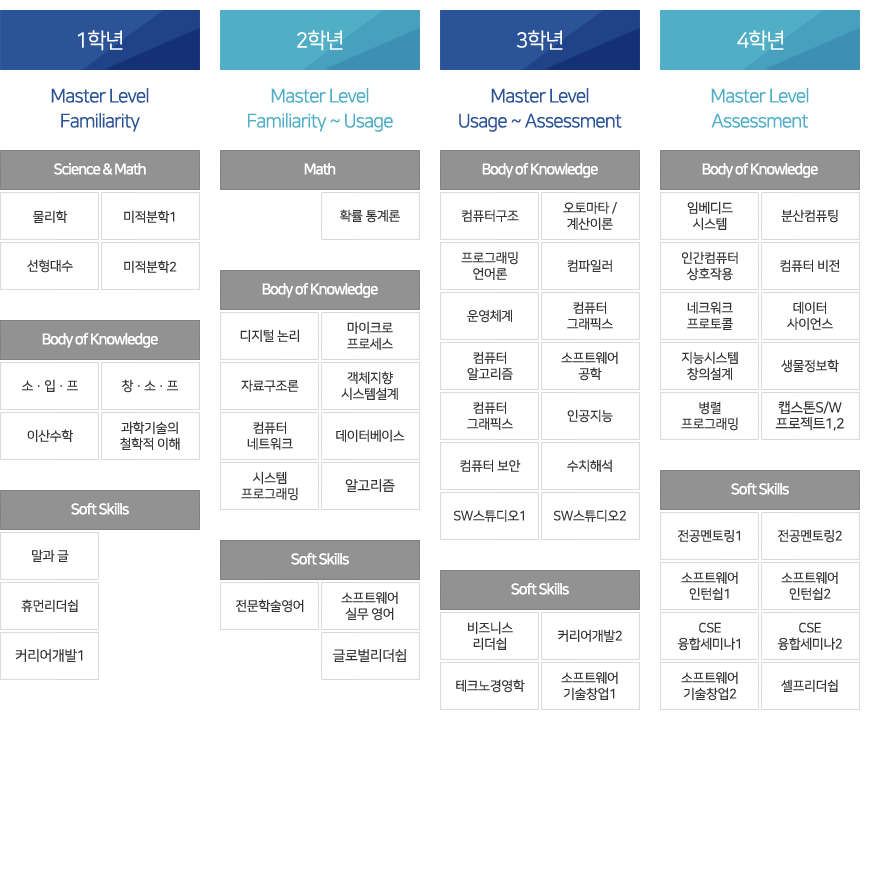
<style>
.page{position:relative;width:870px;height:870px;background:#ffffff}
.page>*{position:absolute;margin:0}
.t1{font:21px "NanumSquareR";letter-spacing:-0.05em;color:#ffffff}
.t2{font:19px/25px "NanumSquareR";letter-spacing:-0.05em;color:#2b5398}
.t3{font:19px/25px "NanumSquareR";letter-spacing:-0.05em;color:#50afc6}
.t4{font:15px "NanumSquareB";letter-spacing:-0.075em;color:#ffffff}
.t5{font:13px "NanumSquareR";letter-spacing:-0.025em;color:#333333}
.t6{font:13px/16px "NanumSquareR";letter-spacing:-0.025em;color:#333333}
.t7{font:14px/16px "NanumSquareR";letter-spacing:-0.025em;color:#333333}
.t8{font:14px "NanumSquareR";letter-spacing:-0.025em;color:#333333}
</style>
<div class="page">
<p class="t1" style="left:77px;top:30px;width:46px;height:21px">1학년</p>
<p class="t1" style="left:297px;top:30px;width:46px;height:21px">2학년</p>
<p class="t1" style="left:516px;top:30px;width:47px;height:21px">3학년</p>
<p class="t1" style="left:737px;top:30px;width:47px;height:21px">4학년</p>
<p class="t2" style="left:51px;top:88px;width:98px;height:44px;text-align:center">Master Level<br>Familiarity</p>
<p class="t3" style="left:248px;top:88px;width:145px;height:44px;text-align:center">Master Level<br>Familiarity ~ Usage</p>
<p class="t2" style="left:459px;top:88px;width:163px;height:44px;text-align:center">Master Level<br>Usage ~ Assessment</p>
<p class="t3" style="left:711px;top:88px;width:98px;height:40px;text-align:center">Master Level<br>Assessment</p>
<p class="t4" style="left:54px;top:163px;width:92px;height:12px">Science &amp; Math</p>
<p class="t4" style="left:304px;top:163px;width:32px;height:12px">Math</p>
<p class="t4" style="left:482px;top:162px;width:116px;height:16px">Body of Knowledge</p>
<p class="t4" style="left:702px;top:162px;width:116px;height:16px">Body of Knowledge</p>
<p class="t5" style="left:340px;top:209px;width:60px;height:14px">확률 통계론</p>
<p class="t5" style="left:462px;top:209px;width:57px;height:13px">컴퓨터구조</p>
<p class="t6" style="left:563px;top:201px;width:54px;height:29px;text-align:center">오토마타 /<br>계산이론</p>
<p class="t6" style="left:687px;top:201px;width:46px;height:29px;text-align:center">임베디드<br>시스템</p>
<p class="t5" style="left:781px;top:209px;width:57px;height:14px">분산컴퓨팅</p>
<p class="t5" style="left:33px;top:210px;width:35px;height:13px">물리학</p>
<p class="t5" style="left:124px;top:210px;width:51px;height:13px">미적분학1</p>
<p class="t6" style="left:461px;top:251px;width:57px;height:29px;text-align:center">프로그래밍<br>언어론</p>
<p class="t6" style="left:682px;top:251px;width:56px;height:30px;text-align:center">인간컴퓨터<br>상호작용</p>
<p class="t5" style="left:27px;top:259px;width:46px;height:14px">선형대수</p>
<p class="t5" style="left:124px;top:260px;width:53px;height:13px">미적분학2</p>
<p class="t5" style="left:567px;top:259px;width:45px;height:13px">컴파일러</p>
<p class="t5" style="left:780px;top:259px;width:60px;height:13px">컴퓨터 비전</p>
<p class="t4" style="left:262px;top:282px;width:116px;height:16px">Body of Knowledge</p>
<p class="t6" style="left:567px;top:301px;width:46px;height:29px;text-align:center">컴퓨터<br>그래픽스</p>
<p class="t6" style="left:687px;top:301px;width:46px;height:29px;text-align:center">네크워크<br>프로토콜</p>
<p class="t6" style="left:787px;top:301px;width:46px;height:29px;text-align:center">데이터<br>사이언스</p>
<p class="t5" style="left:467px;top:309px;width:45px;height:14px">운영체계</p>
<p class="t5" style="left:240px;top:329px;width:59px;height:13px">디지털 논리</p>
<p class="t6" style="left:347px;top:321px;width:46px;height:29px;text-align:center">마이크로<br>프로세스</p>
<p class="t4" style="left:42px;top:332px;width:116px;height:16px">Body of Knowledge</p>
<p class="t6" style="left:467px;top:351px;width:46px;height:29px;text-align:center">컴퓨터<br>알고리즘</p>
<p class="t6" style="left:561px;top:351px;width:57px;height:30px;text-align:center">소프트웨어<br>공학</p>
<p class="t6" style="left:681px;top:351px;width:57px;height:30px;text-align:center">지능시스템<br>창의설계</p>
<p class="t5" style="left:781px;top:359px;width:58px;height:14px">생물정보학</p>
<p class="t6" style="left:341px;top:371px;width:57px;height:29px;text-align:center">객체지향<br>시스템설계</p>
<p class="t5" style="left:22px;top:379px;width:56px;height:13px">소 · 입 · 프</p>
<p class="t5" style="left:122px;top:379px;width:56px;height:14px">창 · 소 · 프</p>
<p class="t5" style="left:241px;top:379px;width:58px;height:13px">자료구조론</p>
<p class="t6" style="left:467px;top:401px;width:46px;height:29px;text-align:center">컴퓨터<br>그래픽스</p>
<p class="t6" style="left:681px;top:401px;width:57px;height:30px;text-align:center">병렬<br>프로그래밍</p>
<p class="t7" style="left:775px;top:401px;width:69px;height:30px;text-align:center">캡스톤S/W<br>프로젝트1,2</p>
<p class="t5" style="left:567px;top:409px;width:46px;height:14px">인공지능</p>
<p class="t6" style="left:120px;top:421px;width:60px;height:29px;text-align:center">과학기술의<br>철학적 이해</p>
<p class="t6" style="left:247px;top:421px;width:46px;height:29px;text-align:center">컴퓨터<br>네트워크</p>
<p class="t5" style="left:27px;top:429px;width:46px;height:13px">이산수학</p>
<p class="t5" style="left:336px;top:429px;width:69px;height:13px">데이터베이스</p>
<p class="t5" style="left:460px;top:459px;width:61px;height:13px">컴퓨터 보안</p>
<p class="t5" style="left:567px;top:459px;width:45px;height:13px">수치해석</p>
<p class="t6" style="left:241px;top:471px;width:57px;height:30px;text-align:center">시스템<br>프로그래밍</p>
<p class="t8" style="left:345px;top:479px;width:50px;height:13px">알고리즘</p>
<p class="t4" style="left:731px;top:482px;width:58px;height:13px">Soft Skills</p>
<p class="t4" style="left:71px;top:502px;width:58px;height:13px">Soft Skills</p>
<p class="t5" style="left:454px;top:509px;width:70px;height:13px">SW스튜디오1</p>
<p class="t5" style="left:554px;top:509px;width:72px;height:13px">SW스튜디오2</p>
<p class="t5" style="left:678px;top:529px;width:62px;height:14px">전공멘토링1</p>
<p class="t5" style="left:778px;top:529px;width:64px;height:14px">전공멘토링2</p>
<p class="t5" style="left:32px;top:549px;width:37px;height:13px">말과 글</p>
<p class="t4" style="left:291px;top:552px;width:58px;height:13px">Soft Skills</p>
<p class="t4" style="left:511px;top:582px;width:58px;height:13px">Soft Skills</p>
<p class="t6" style="left:681px;top:571px;width:57px;height:29px;text-align:center">소프트웨어<br>인턴쉽1</p>
<p class="t6" style="left:781px;top:571px;width:57px;height:29px;text-align:center">소프트웨어<br>인턴쉽2</p>
<p class="t6" style="left:341px;top:591px;width:57px;height:30px;text-align:center">소프트웨어<br>실무 영어</p>
<p class="t5" style="left:21px;top:599px;width:57px;height:13px">휴먼리더쉽</p>
<p class="t5" style="left:236px;top:599px;width:68px;height:14px">전문학술영어</p>
<p class="t6" style="left:468px;top:621px;width:45px;height:29px;text-align:center">비즈니스<br>리더쉽</p>
<p class="t5" style="left:558px;top:629px;width:64px;height:13px">커리어개발2</p>
<p class="t6" style="left:677px;top:622px;width:63px;height:29px;text-align:center">CSE<br>융합세미나1</p>
<p class="t6" style="left:777px;top:622px;width:65px;height:29px;text-align:center">CSE<br>융합세미나2</p>
<p class="t8" style="left:15px;top:649px;width:68px;height:13px">커리어개발1</p>
<p class="t8" style="left:333px;top:649px;width:73px;height:13px">글로벌리더쉽</p>
<p class="t6" style="left:561px;top:671px;width:57px;height:30px;text-align:center">소프트웨어<br>기술창업1</p>
<p class="t6" style="left:681px;top:671px;width:57px;height:30px;text-align:center">소프트웨어<br>기술창업2</p>
<p class="t5" style="left:456px;top:679px;width:69px;height:14px">테크노경영학</p>
<p class="t5" style="left:781px;top:679px;width:57px;height:13px">셀프리더쉽</p>
</div>
